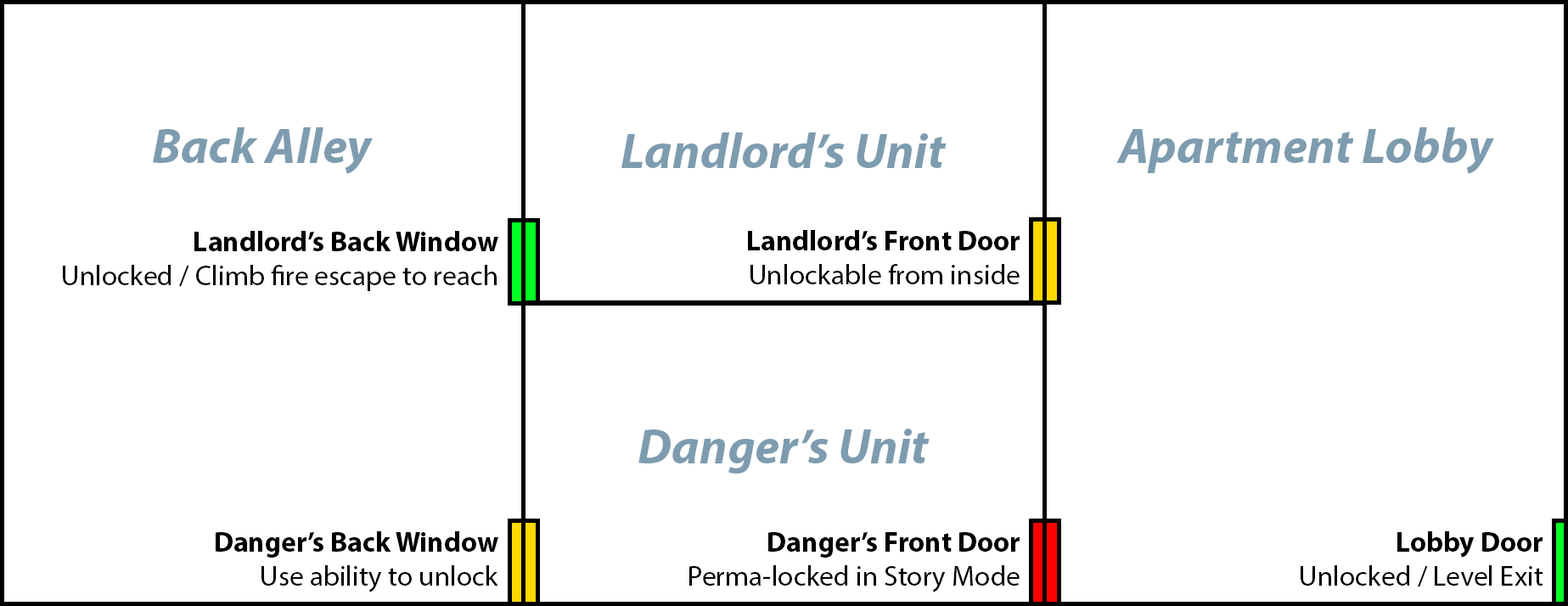
<style>
.page{position:relative;width:1568px;height:606px;background:#ffffff}
.page>*{position:absolute;margin:0}
.t1{font:49.5px "MyriadPro-BoldIt";color:#7e9caf}
.t2{font:28.3px "MyriadPro-Regular";color:#000000}
.t3{font:28.3px "MyriadPro-Bold";color:#000000}
</style>
<div class="page">
<p class="t1" style="left:153px;top:127px;width:220px;height:47px">Back Alley</p>
<p class="t1" style="left:621px;top:132px;width:326px;height:36px">Landlord’s Unit</p>
<p class="t1" style="left:1116px;top:127px;width:378px;height:47px">Apartment Lobby</p>
<p class="t2" style="left:63px;top:231px;width:435px;height:60px;text-align:right"><span class="t3">Landlord’s Back Window<br></span>Unlocked / Climb fire escape to reach</p>
<p class="t2" style="left:748px;top:230px;width:272px;height:54px;text-align:right"><span class="t3">Landlord’s Front Door<br></span>Unlockable from inside</p>
<p class="t1" style="left:638px;top:429px;width:292px;height:45px">Danger’s Unit</p>
<p class="t2" style="left:216px;top:531px;width:282px;height:62px;text-align:right"><span class="t3">Danger’s Back Window<br></span>Use ability to unlock</p>
<p class="t2" style="left:689px;top:532px;width:331px;height:61px;text-align:right"><span class="t3">Danger’s Front Door<br></span>Perma-locked in Story Mode</p>
<p class="t2" style="left:1301px;top:531px;width:242px;height:56px;text-align:right"><span class="t3">Lobby Door<br></span>Unlocked / Level Exit</p>
</div>
